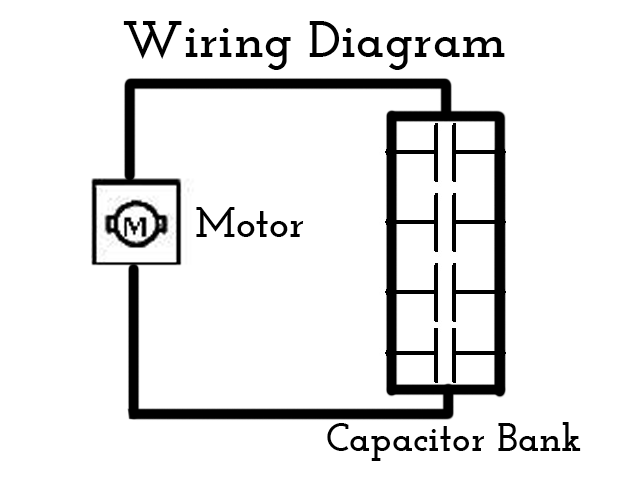
<style>
.page{position:relative;width:638px;height:479px;background:#ffffff}
.page>*{position:absolute;margin:0}
.t1{font:52.2px "JosefinSlab-Bold";color:#000000}
.t2{font:41.7px "JosefinSlab-Bold";color:#000000}
.t3{font:38.7px "JosefinSlab-Bold";color:#000000}
</style>
<div class="page">
<p class="t1" style="left:123px;top:21px;width:382px;height:49px">Wiring Diagram</p>
<p class="t2" style="left:196px;top:207px;width:108px;height:30px">Motor</p>
<p class="t3" style="left:327px;top:422px;width:254px;height:39px">Capacitor Bank</p>
</div>
